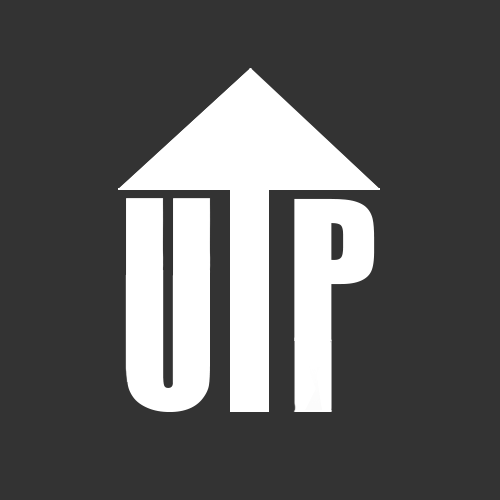
<style>
.page{position:relative;width:500px;height:500px;background:#333333}
.page>*{position:absolute;margin:0}
.t1{font:179.5px "Impact";letter-spacing:0.025em;color:#ffffff}
.t2{font:176.2px "Impact";letter-spacing:0.025em;color:#ffffff}
</style>
<div class="page">
<p class="t1" style="left:294px;top:198px;width:81px;height:143px">P</p>
<p class="t2" style="left:126px;top:269px;width:84px;height:143px">U</p>
</div>
